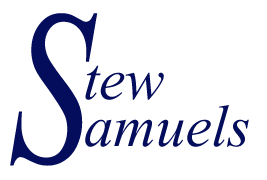
<style>
.page{position:relative;width:267px;height:180px;background:#ffffff}
.page>*{position:absolute;margin:0}
.t1{font:273px "Vijaya";color:#040d5b;scale:0.74 1}
.t2{font:73.2px "Vijaya";color:#040d5b}
</style>
<div class="page">
<p class="t1" style="left:10px;top:13px;width:88px;height:153px">S</p>
<p class="t2" style="left:85px;top:65px;width:79px;height:35px">tew</p>
<p class="t2" style="left:85px;top:105px;width:164px;height:42px">amuels</p>
</div>
